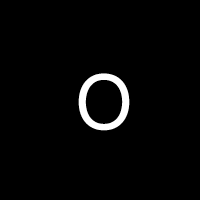
<style>
.page{position:relative;width:200px;height:200px;background:#000000}
.page>*{position:absolute;margin:0}
.t1{font:72px "Helvetica-Light";color:#ffffff;font-weight:bold}
</style>
<div class="page">
<p class="t1" style="left:78px;top:73px;width:52px;height:58px">O</p>
</div>
